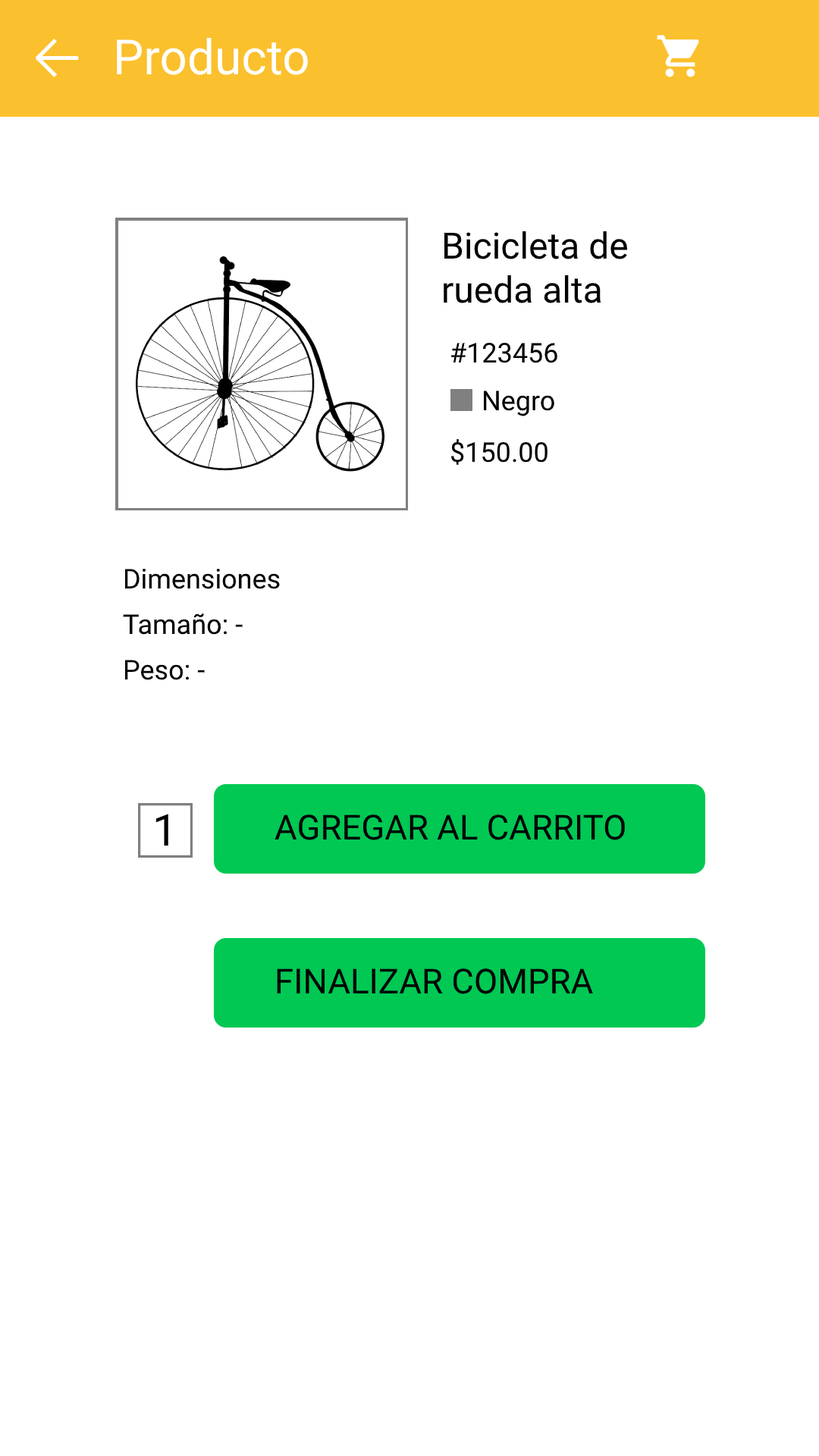
<style>
.page{position:relative;width:819px;height:1456px;background:#ffffff}
.page>*{position:absolute;margin:0}
.t1{font:48.5px "Roboto-Regular";color:#ffffff}
.t2{font:36.4px "Roboto-Regular";color:#000000}
.t3{font:27.3px "Roboto-Regular";color:#000000}
.t4{font:43.7px "Roboto-Regular";color:#000000}
.t5{font:34.5px "Roboto-Regular";color:#000000}
</style>
<div class="page">
<p class="t1" style="left:117px;top:38px;width:191px;height:37px">Producto</p>
<p class="t2" style="left:444px;top:231px;width:183px;height:72px">Bicicleta de <br>rueda alta</p>
<p class="t3" style="left:451px;top:343px;width:106px;height:20px">#123456</p>
<p class="t3" style="left:483px;top:391px;width:71px;height:25px">Negro</p>
<p class="t3" style="left:450px;top:439px;width:98px;height:26px">$150.00</p>
<p class="t3" style="left:124px;top:569px;width:156px;height:20px">Dimensiones</p>
<p class="t3" style="left:123px;top:613px;width:120px;height:22px">Tamaño: -</p>
<p class="t3" style="left:124px;top:660px;width:81px;height:20px">Peso: -</p>
<p class="t4" style="left:156px;top:814px;width:12px;height:32px">1</p>
<p class="t5" style="left:275px;top:814px;width:350px;height:26px">AGREGAR AL CARRITO</p>
<p class="t5" style="left:277px;top:968px;width:316px;height:26px">FINALIZAR COMPRA</p>
</div>
